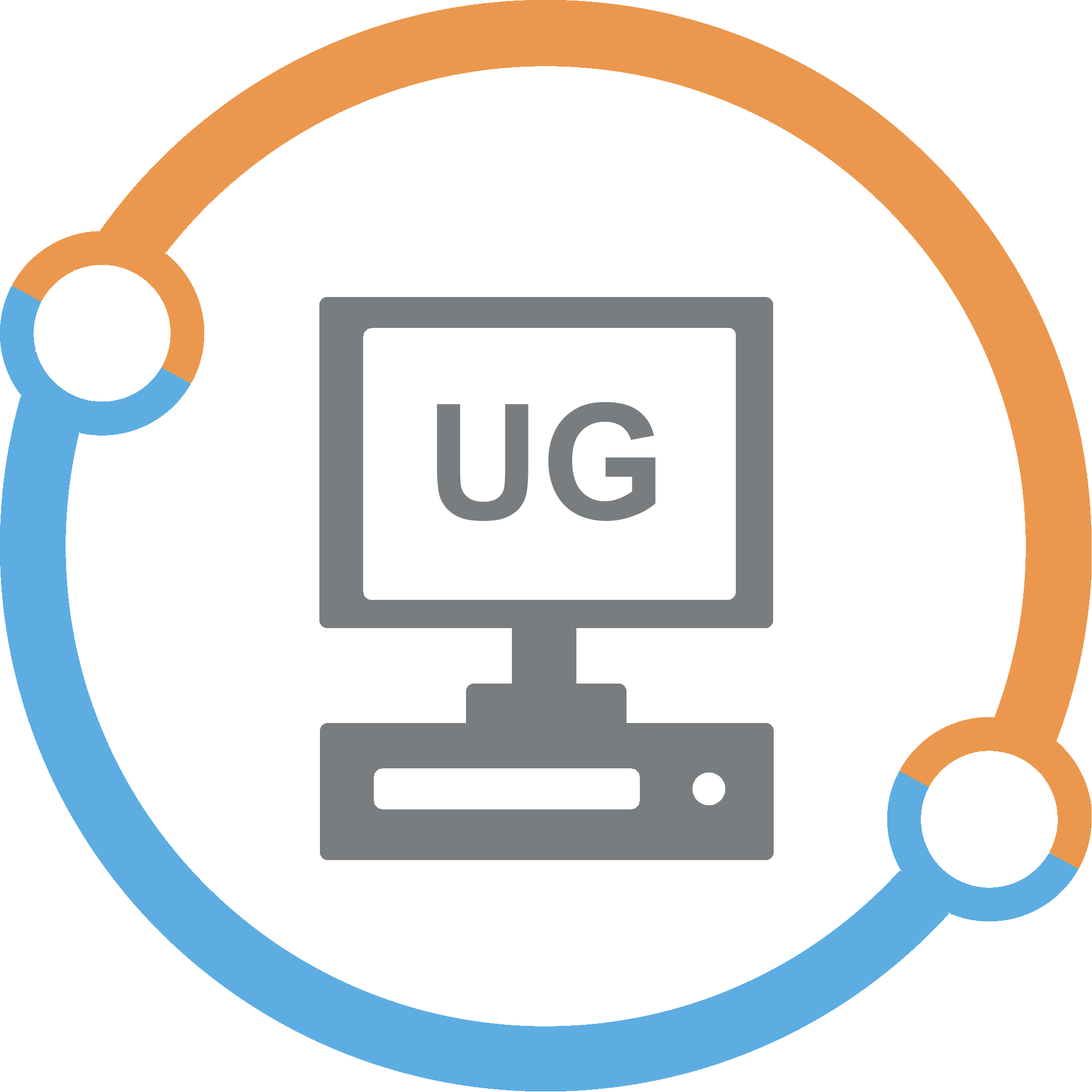
<style>
.page{position:relative;width:1092px;height:1092px;background:#ffffff}
.page>*{position:absolute;margin:0}
.t1{font:160px "Arial-BoldMT";color:#797d7f}
</style>
<div class="page">
<p class="t1" style="left:437px;top:402px;width:219px;height:119px">UG</p>
</div>
